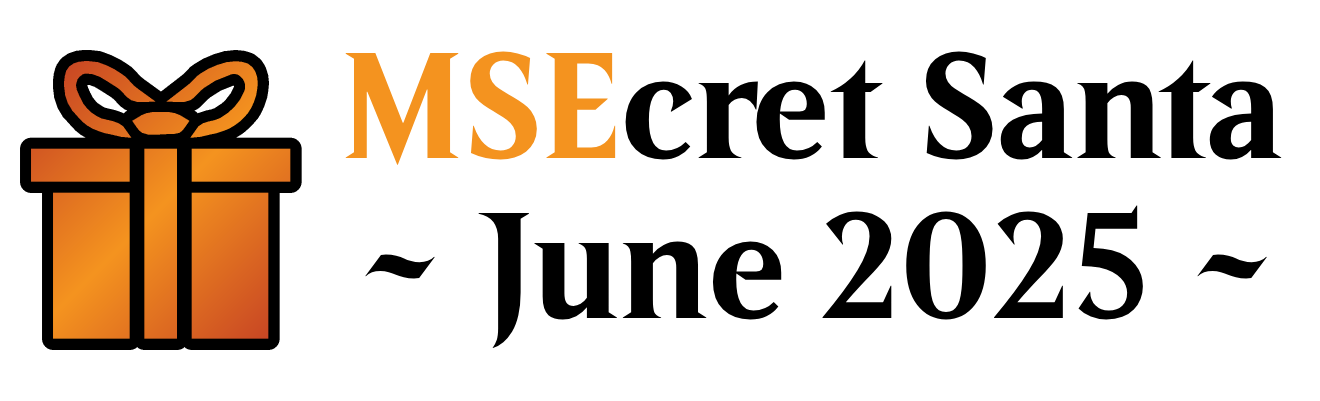
<style>
.page{position:relative;width:1320px;height:401px;background:#ffffff}
.page>*{position:absolute;margin:0}
.t1{font:150px/160px "Beleren-Bold";color:#000000}
.t2{font:150px/160px "Beleren-Bold";color:#f4931f}
</style>
<div class="page">
<p class="t1" style="left:345px;top:51px;width:937px;height:298px"><span class="t2">MSE</span>cret Santa<br>~ June 2025 ~</p>
</div>
